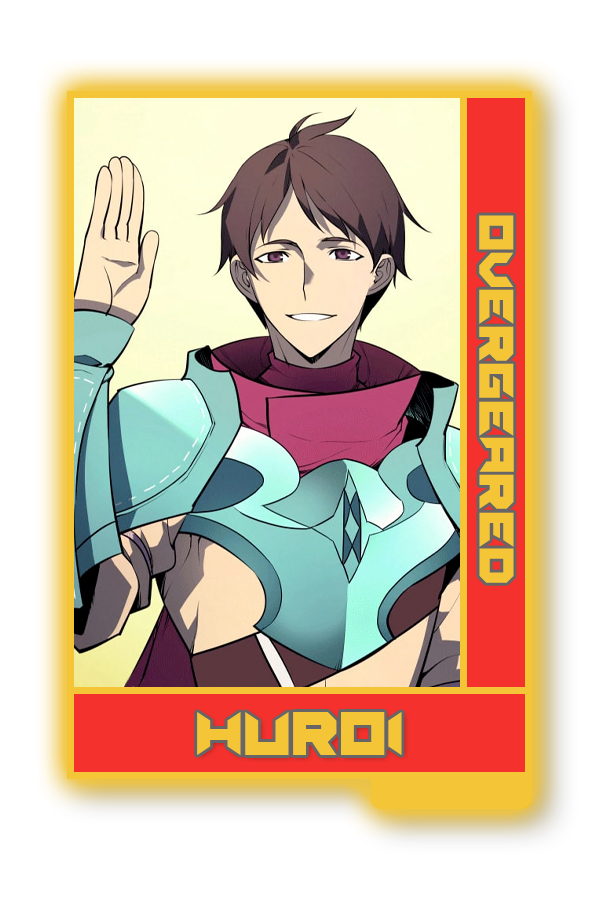
<style>
.page{position:relative;width:600px;height:900px;background:#ffffff}
.page>*{position:absolute;margin:0}
.t1{font:48.8px "Suggested-Regular";color:#f4c536}
.t2{font:62.5px "Suggested-Regular";color:#f4c536}
</style>
<div class="page">
<p class="t1" style="left:479px;top:215px;width:35px;height:368px;rotate:90deg">OVERGEARED</p>
<p class="t2" style="left:197px;top:712px;width:205px;height:43px">huroi</p>
</div>
